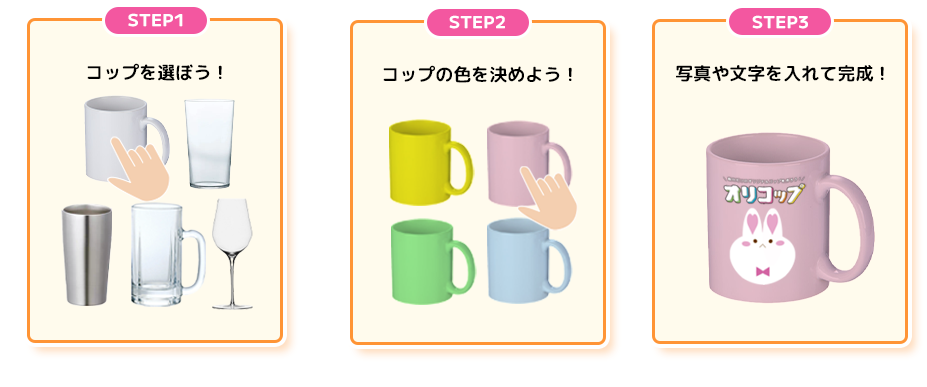
<style>
.page{position:relative;width:927px;height:387px;background:#fffbed}
.page>*{position:absolute;margin:0}
.t1{font:16.3px "MPLUS1-SemiBold";letter-spacing:0.04em;color:#ffffff}
.t2{font:18px "RoundedMplus1c-Bold";color:#000000}
</style>
<div class="page">
<p class="t1" style="left:128px;top:13px;width:55px;height:14px">STEP1</p>
<p class="t1" style="left:449px;top:15px;width:56px;height:14px">STEP2</p>
<p class="t1" style="left:752px;top:15px;width:56px;height:14px">STEP3</p>
<p class="t2" style="left:87px;top:63px;width:135px;height:18px">コップを選ぼう！</p>
<p class="t2" style="left:383px;top:65px;width:189px;height:18px">コップの色を決めよう！</p>
<p class="t2" style="left:676px;top:65px;width:208px;height:17px">写真や文字を入れて完成！</p>
</div>
